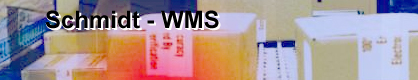
<style>
.page{position:relative;width:418px;height:80px}
.page>*{position:absolute;margin:0}
.t1{font:24px "Arial-BoldMT";color:#000000}
</style>
<div class="page">
<p class="t1" style="left:45px;top:11px;width:174px;height:19px">Schmidt - WMS</p>
<p class="t1" style="left:45px;top:10px;width:174px;height:19px">Schmidt - WMS</p>
</div>
